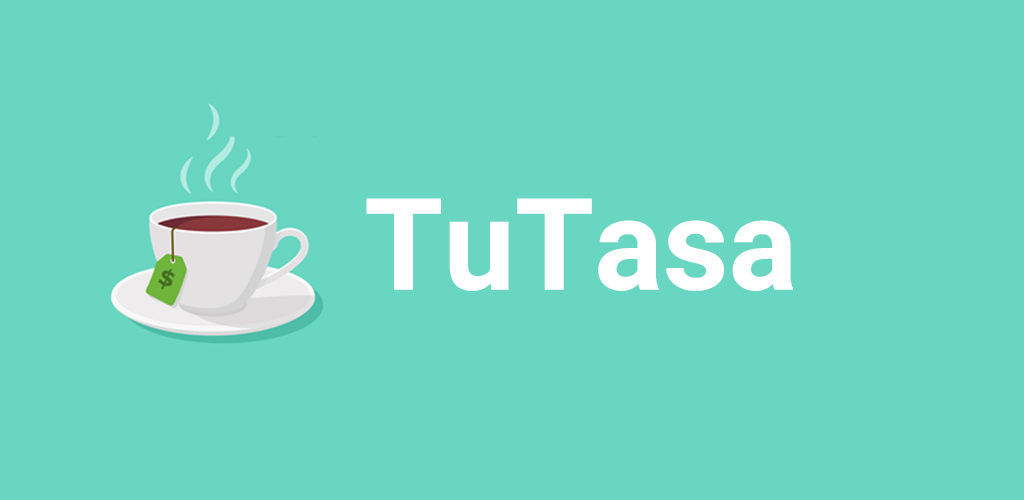
<style>
.page{position:relative;width:1024px;height:500px;background:#69d6c1}
.page>*{position:absolute;margin:0}
.t1{font:128px "Roboto-Bold";color:#ffffff}
</style>
<div class="page">
<p class="t1" style="left:366px;top:198px;width:427px;height:93px">TuTasa</p>
</div>
